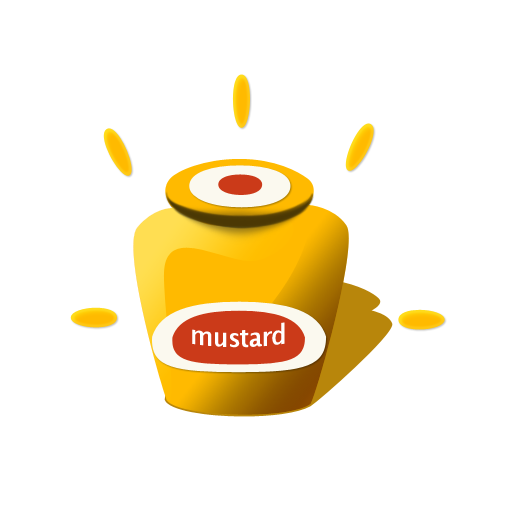
<style>
.page{position:relative;width:512px;height:512px;background:#ffffff}
.page>*{position:absolute;margin:0}
.t1{font:26.9px "LucidaGrande";letter-spacing:-0.04em;color:#ffffff;scale:0.96 1}
</style>
<div class="page">
<p class="t1" style="left:192px;top:322px;width:93px;height:26px">mustard</p>
</div>
